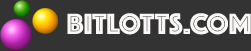
<style>
.page{position:relative;width:251px;height:51px;background:#333333}
.page>*{position:absolute;margin:0}
.t1{font:30px "Phosphate-Inline";color:#faf7f7}
</style>
<div class="page">
<p class="t1" style="left:67px;top:13px;width:184px;height:22px">BITLOTTS.COM</p>
</div>
